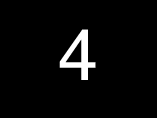
<style>
.page{position:relative;width:157px;height:118px;background:#000000}
.page>*{position:absolute;margin:0}
.t1{font:72px "Helvetica";color:#ffffff}
</style>
<div class="page">
<p class="t1" style="left:59px;top:29px;width:37px;height:51px">4</p>
</div>
